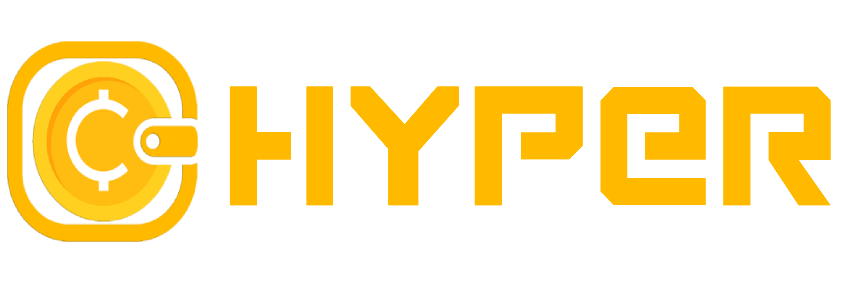
<style>
.page{position:relative;width:850px;height:283px;background:#ffffff}
.page>*{position:absolute;margin:0}
.t1{font:179px "Loaded";color:#ffba00}
</style>
<div class="page">
<p class="t1" style="left:229px;top:86px;width:602px;height:120px">Hyper</p>
</div>
